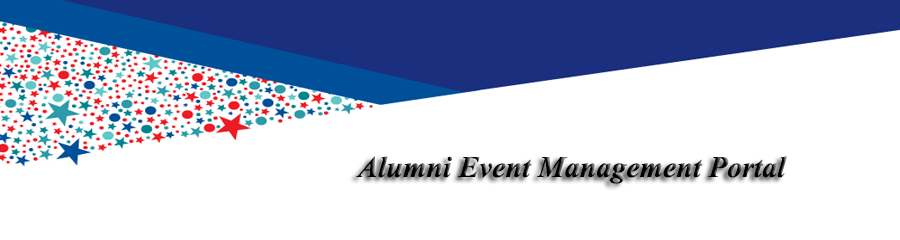
<style>
.page{position:relative;width:900px;height:240px;background:#ffffff}
.page>*{position:absolute;margin:0}
.t1{font:30px "TimesNewRomanPS-BoldItalicMT";color:#000000}
</style>
<div class="page">
<p class="t1" style="left:356px;top:156px;width:431px;height:28px">Alumni Event Management Portal</p>
</div>
